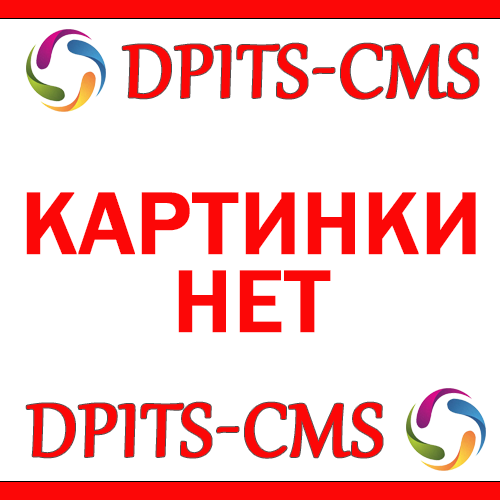
<style>
.page{position:relative;width:500px;height:500px;background:#ffffff}
.page>*{position:absolute;margin:0}
.t1{font:91px "Gabriola";color:#fc0707;text-transform:uppercase;font-weight:bold}
.t2{font:91px/78px "FranklinGothic-Medium";color:#fc0707;text-transform:uppercase;font-weight:bold}
</style>
<div class="page">
<p class="t1" style="left:122px;top:43px;width:357px;height:56px">DPITS-CMS</p>
<p class="t2" style="left:26px;top:192px;width:450px;height:141px;text-align:center">КАРТИНКИ<br>НЕТ</p>
<p class="t1" style="left:26px;top:402px;width:357px;height:56px">DPITS-CMS</p>
</div>
